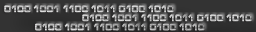
<style>
.page{position:relative;width:256px;height:32px;background:#333333}
.page>*{position:absolute;margin:0}
.t1{font:10px "MicrogrammaD-BoldExte";font-weight:bold;scale:0.75 1}
</style>
<div class="page">
<p class="t1" style="left:4px;top:5px;width:170px;height:8px">0100 1001 1100 1011 0100 1010</p>
<p class="t1" style="left:82px;top:14px;width:170px;height:8px">0100 1001 1100 1011 0100 1010</p>
<p class="t1" style="left:35px;top:23px;width:170px;height:8px">0100 1001 1100 1011 0100 1010</p>
</div>
